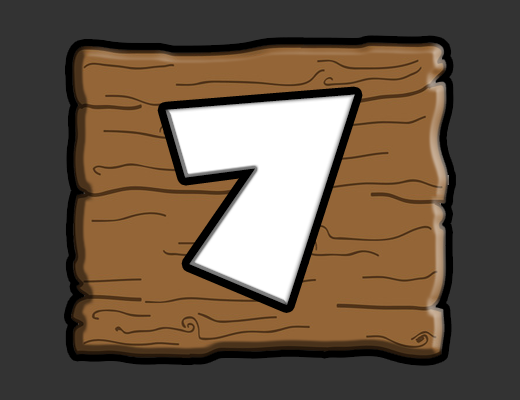
<style>
.page{position:relative;width:520px;height:400px;background:#333333}
.page>*{position:absolute;margin:0}
.t1{font:300px "Funhouse";color:#ffffff}
</style>
<div class="page">
<p class="t1" style="left:165px;top:94px;width:190px;height:211px">7</p>
</div>
